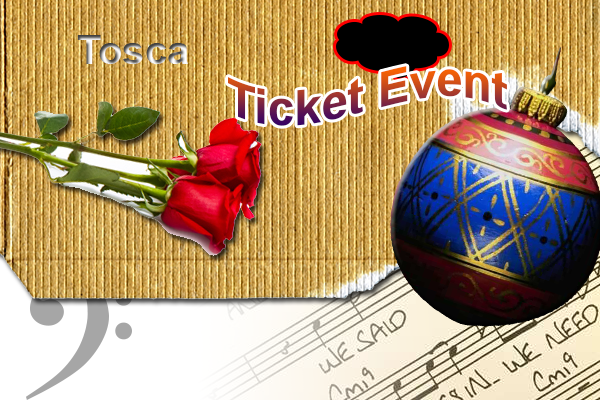
<style>
.page{position:relative;width:600px;height:400px}
.page>*{position:absolute;margin:0}
.t1{font:40px "Arial-BoldMT"}
.t2{font:48px "Arial-BoldMT"}
</style>
<div class="page">
<p class="t1" style="left:77px;top:35px;width:111px;height:29px">Tosca</p>
<p class="t2" style="left:228px;top:66px;width:279px;height:60px">Ticket Event</p>
</div>
